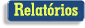
<style>
.page{position:relative;width:85px;height:28px;background:#1f497d}
.page>*{position:absolute;margin:0}
.t1{font:18.5px "GeometricSlab703BT-BoldCond";color:#edfb56;scale:1.05 1}
</style>
<div class="page">
<p class="t1" style="left:14px;top:2px;width:64px;height:14px">Relatórios</p>
</div>
